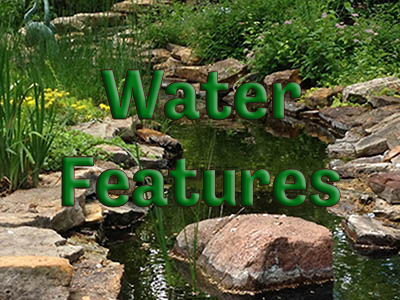
<style>
.page{position:relative;width:400px;height:300px}
.page>*{position:absolute;margin:0}
.t1{font:72px "Tenso-Bold"}
</style>
<div class="page">
<p class="t1" style="left:62px;top:70px;width:278px;height:137px;text-align:center">Water<br>Features</p>
</div>
